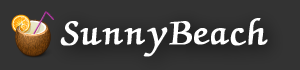
<style>
.page{position:relative;width:300px;height:70px;background:#333333}
.page>*{position:absolute;margin:0}
.t1{font:40px "CyrillicChancellor";color:#ffffff;font-weight:bold;scale:1.16 1}
</style>
<div class="page">
<p class="t1" style="left:60px;top:18px;width:208px;height:39px">SunnyBeach</p>
</div>
